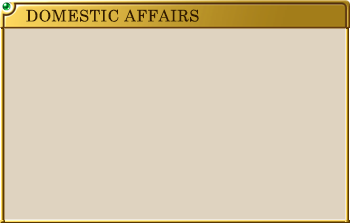
<style>
.page{position:relative;width:352px;height:223px;background:#dfd3c0}
.page>*{position:absolute;margin:0}
.t1{font:16px "CenturySchoolbook";letter-spacing:0.025em;color:#321a02}
</style>
<div class="page">
<p class="t1" style="left:26px;top:9px;width:173px;height:13px">DOMESTIC AFFAIRS</p>
</div>
